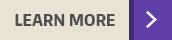
<style>
.page{position:relative;width:172px;height:40px;background:#e8e3d3}
.page>*{position:absolute;margin:0}
.t1{font:17px "EncodeSansCompressed-ExtraBold";letter-spacing:0.005em;color:#515050}
</style>
<div class="page">
<p class="t1" style="left:15px;top:14px;width:100px;height:12px">LEARN MORE</p>
</div>
